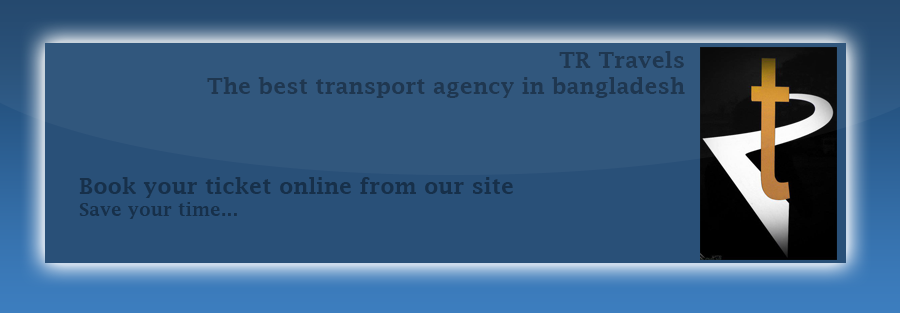
<style>
.page{position:relative;width:900px;height:313px;background:#31577d}
.page>*{position:absolute;margin:0}
.t1{font:22px "LucidaFax-Demi";color:#1f3750}
.t2{font:22px "LucidaFax-Demi";color:#17304a}
.t3{font:18px "LucidaFax-Demi";color:#17304a}
</style>
<div class="page">
<p class="t1" style="left:207px;top:51px;width:478px;height:47px;text-align:right">TR Travels<br>The best transport agency in bangladesh</p>
<p class="t2" style="left:79px;top:177px;width:434px;height:42px">Book your ticket online from our site<br><span class="t3">Save your time...</span></p>
</div>
